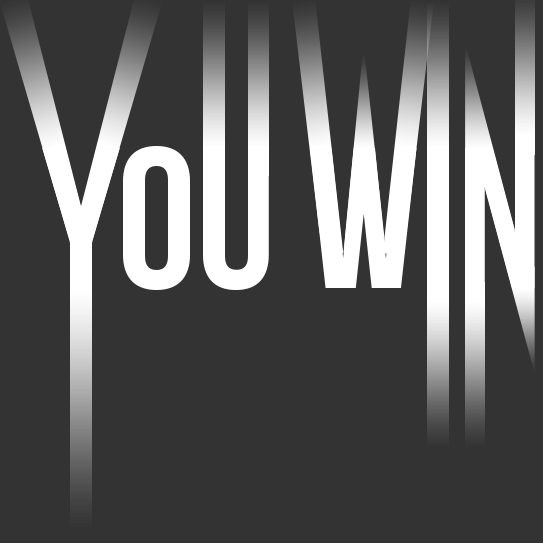
<style>
.page{position:relative;width:543px;height:543px;background:#333333}
.page>*{position:absolute;margin:0}
.t1{font:200px "BebasNeueBold";color:#ffffff}
</style>
<div class="page">
<p class="t1" style="left:42px;top:146px;width:493px;height:144px">YOU WIN</p>
</div>
